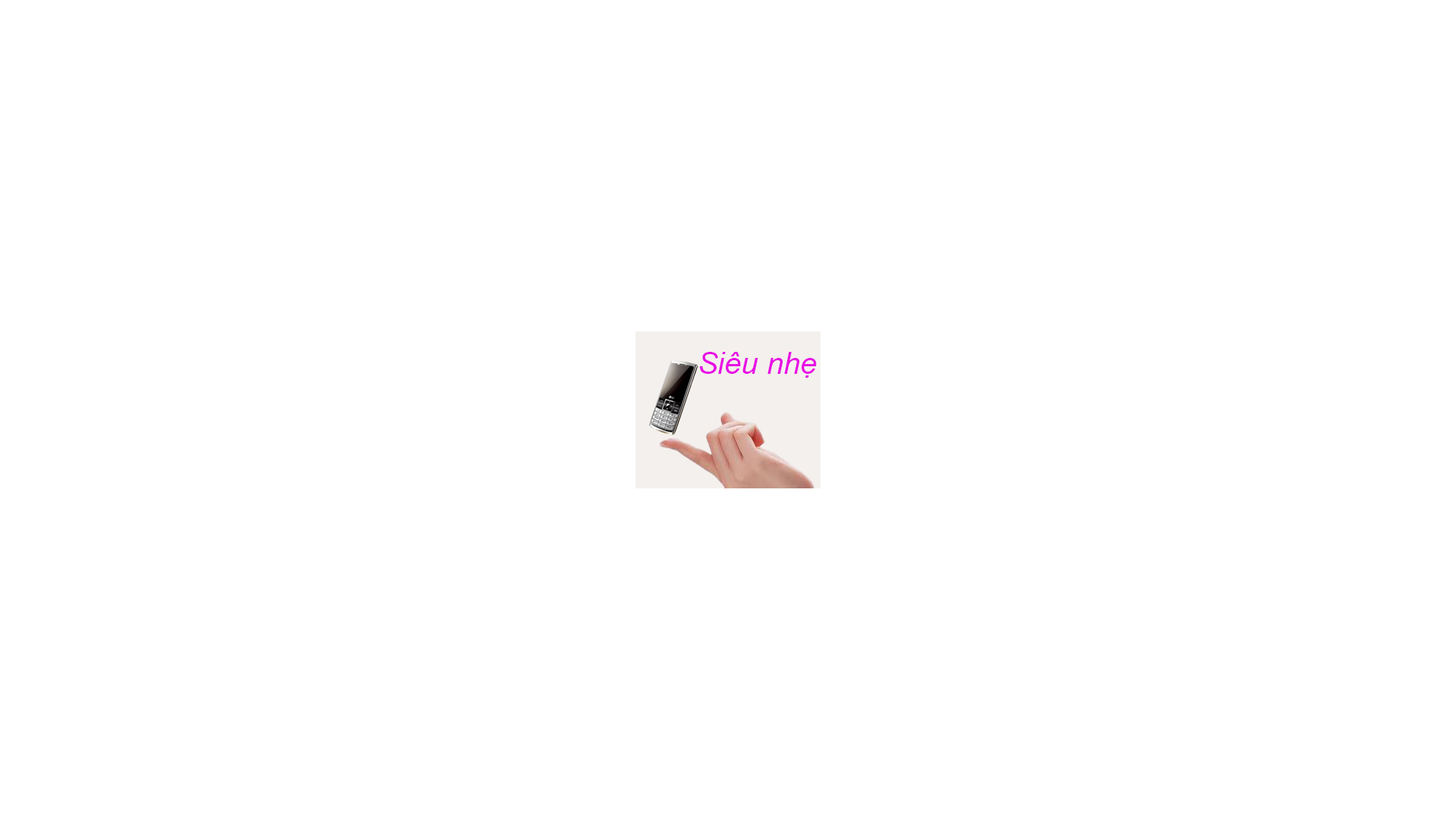
<style>
.page{position:relative;width:1456px;height:819px;background:#ffffff}
.page>*{position:absolute;margin:0}
.t1{font:30.3px "Arial-ItalicMT";color:#e80fe5}
</style>
<div class="page">
<p class="t1" style="left:699px;top:352px;width:118px;height:26px">Siêu nhẹ</p>
</div>
